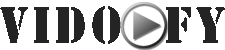
<style>
.page{position:relative;width:225px;height:50px;background:#ffffff}
.page>*{position:absolute;margin:0}
.t1{font:48px "StencilStd";letter-spacing:0.1em;color:#242424;scale:0.9 1}
</style>
<div class="page">
<p class="t1" style="left:0px;top:6px;width:225px;height:38px">VIDO  FY</p>
</div>
